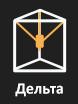
<style>
.page{position:relative;width:78px;height:104px;background:#202020}
.page>*{position:absolute;margin:0}
.t1{font:12px "Calibri-Bold";color:#ffffff}
</style>
<div class="page">
<p class="t1" style="left:15px;top:83px;width:48px;height:14px">Дельта</p>
</div>
